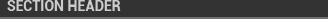
<style>
.page{position:relative;width:328px;height:19px;background:#333333}
.page>*{position:absolute;margin:0}
.t1{font:14px "Roboto-Bold";color:#cccccc}
</style>
<div class="page">
<p class="t1" style="left:7px;top:0px;width:114px;height:11px">SECTION HEADER</p>
</div>
